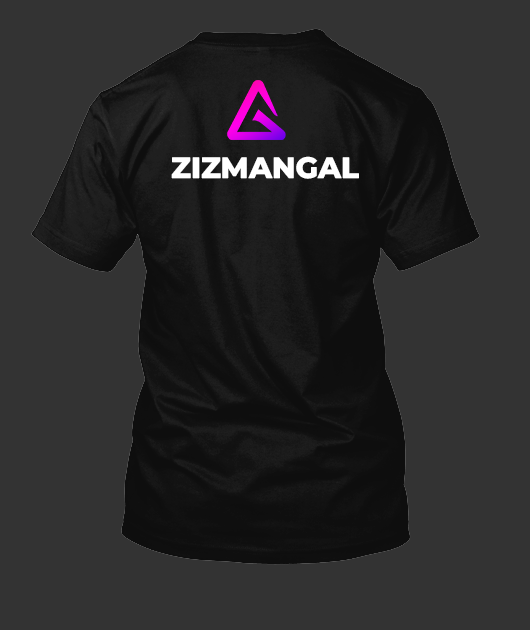
<style>
.page{position:relative;width:530px;height:630px;background:#333333}
.page>*{position:absolute;margin:0}
.t1{font:29.4px "MontserratRoman-ExtraBold";color:#ffffff;text-transform:uppercase}
</style>
<div class="page">
<p class="t1" style="left:171px;top:156px;width:188px;height:23px">zizmangal</p>
</div>
